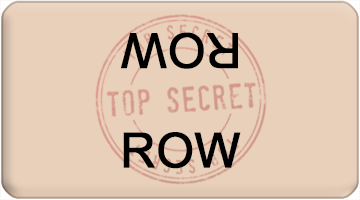
<style>
.page{position:relative;width:360px;height:200px;background:#e8d0bb}
.page>*{position:absolute;margin:0}
.t1{font:48px "ArialMT";color:#000000;font-weight:bold}
</style>
<div class="page">
<p class="t1" style="left:121px;top:32px;width:117px;height:37px;rotate:180deg">ROW</p>
<p class="t1" style="left:123px;top:132px;width:118px;height:37px">ROW</p>
</div>
